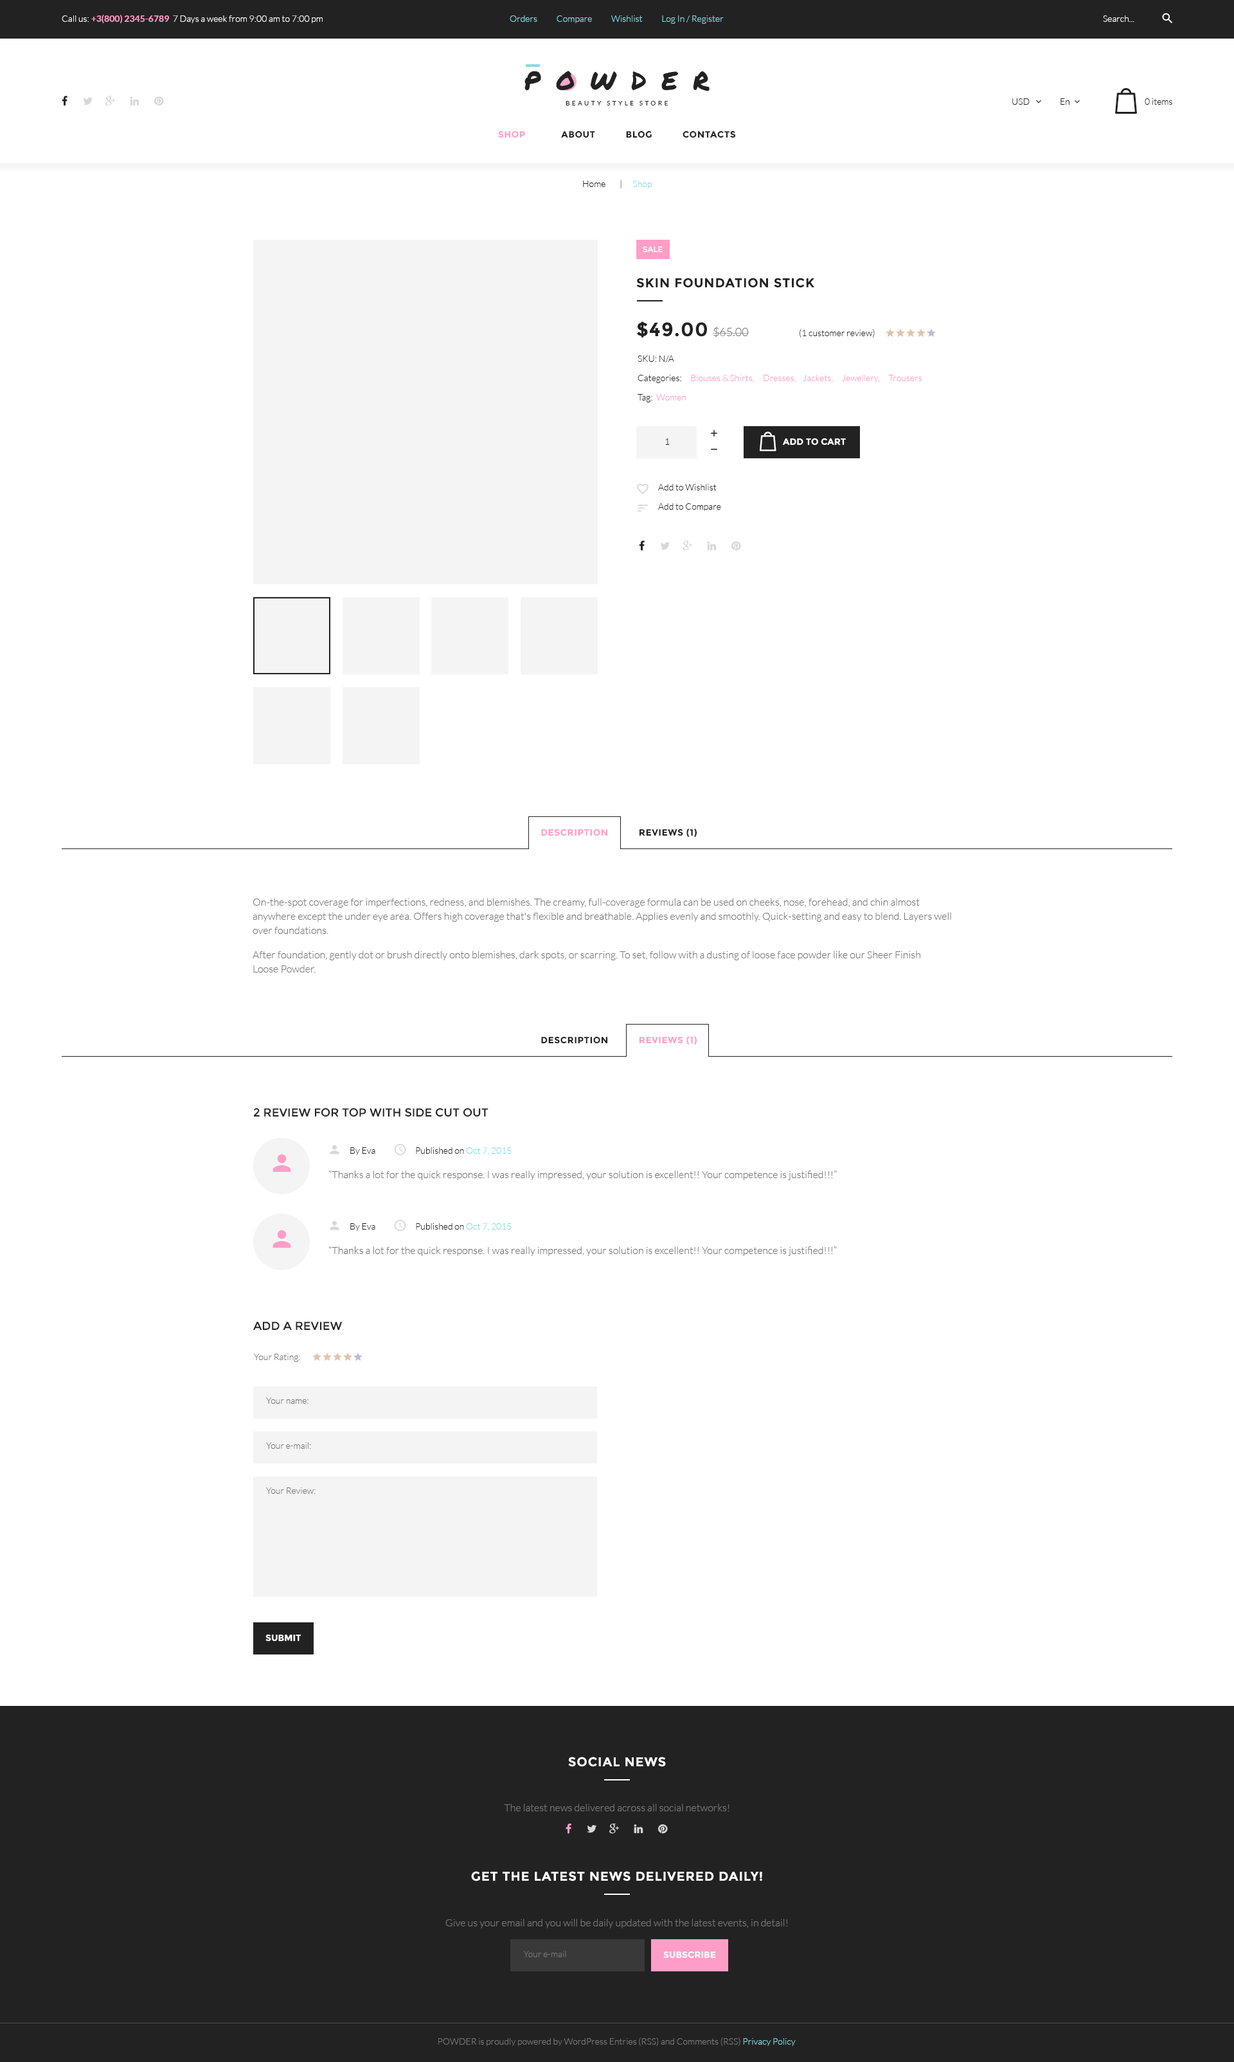
<style>
.page{position:relative;width:1234px;height:2062px;background:#ffffff}
.page>*{position:absolute;margin:0}
.t1{font:9px "Lato-Light";color:#ffffff}
.t2{font:9px "Lato-Bold";color:#fe9ec7}
.t3{font:9px "Lato-Light";color:#81dcdd}
.t4{font:25.7px "PermanentMarker";letter-spacing:0.6em;color:#232222;text-transform:uppercase}
.t5{font:6.4px "Lato-Regular";letter-spacing:0.34em;color:#232222;text-transform:uppercase}
.t6{font:9px "Lato-Light";color:#232222}
.t7{font:9px "Montserrat-Bold";letter-spacing:0.04em;color:#232222;text-transform:uppercase}
.t8{font:9px "Montserrat-Bold";letter-spacing:0.04em;color:#fe9ec7;text-transform:uppercase}
.t9{font:7.7px "Montserrat-Regular";color:#ffffff;text-transform:uppercase}
.t10{font:12.9px "Montserrat-Bold";letter-spacing:0.04em;color:#232222;text-transform:uppercase}
.t11{font:19.3px "Montserrat-Bold";letter-spacing:0.04em;color:#232222;text-transform:uppercase}
.t12{font:11.6px "Lato-Light";color:#777777}
.t13{font:9px/19.3px "Lato-Light";color:#fe9ec7}
.t14{font:9px/19.3px "Lato-Light";color:#232222}
.t15{font:9px "Montserrat-Bold";color:#ffffff;text-transform:uppercase}
.t16{font:10.3px/14.1px "Lato-Light";color:#777777}
.t17{font:11.6px "Montserrat-Regular";color:#232222;text-transform:uppercase}
.t18{font:10.3px "Lato-Light";color:#777777}
.t19{font:9px "Lato-Light";color:#777777}
.t20{font:12.9px "Montserrat-Bold";letter-spacing:0.04em;color:#ffffff;text-transform:uppercase}
.t21{font:9px "Lato-Light";color:#777777;text-transform:uppercase}
</style>
<div class="page">
<p class="t1" style="left:62px;top:15px;width:261px;height:9px">Call us: <span class="t2">+3(800) 2345-6789 </span> 7 Days a week from 9:00 am to 7:00 pm</p>
<p class="t3" style="left:510px;top:15px;width:214px;height:9px">Orders           Compare           Wishlist           Log In / Register</p>
<p class="t1" style="left:1103px;top:15px;width:32px;height:7px">Search...</p>
<p class="t4" style="left:525px;top:71px;width:185px;height:20px">powder</p>
<p class="t5" style="left:566px;top:101px;width:102px;height:4px">Beauty Style Store</p>
<p class="t6" style="left:1013px;top:98px;width:17px;height:7px">USD</p>
<p class="t6" style="left:1061px;top:98px;width:9px;height:7px">En</p>
<p class="t6" style="left:1145px;top:98px;width:28px;height:7px">0 items</p>
<p class="t7" style="left:498px;top:130px;width:238px;height:8px"><span class="t8">Shop      </span>       About           Blog           Contacts</p>
<p class="t6" style="left:583px;top:180px;width:69px;height:8px">Home        |      <span class="t3">Shop</span></p>
<p class="t9" style="left:643px;top:246px;width:20px;height:7px">Sale</p>
<p class="t10" style="left:636px;top:278px;width:179px;height:10px">SKIN FOUNDATION STICK</p>
<p class="t11" style="left:637px;top:321px;width:112px;height:17px">$49.00 <span class="t12">$65.00</span></p>
<p class="t6" style="left:800px;top:329px;width:75px;height:9px">(1 customer review)</p>
<p class="t13" style="left:638px;top:356px;width:285px;height:46px"><span class="t14">SKU: N/A<br>Categories:     </span>Blouses &amp; Shirts,     Dresses,    Jackets,     Jewellery,     Trousers<br><span class="t14">Tag:  </span>Women</p>
<p class="t15" style="left:783px;top:438px;width:63px;height:8px">Add to cart</p>
<p class="t6" style="left:665px;top:438px;width:5px;height:7px">1</p>
<p class="t14" style="left:658px;top:484px;width:63px;height:27px">Add to Wishlist<br>Add to Compare</p>
<p class="t8" style="left:541px;top:829px;width:157px;height:8px">Description      <span class="t7">     Reviews (1)</span></p>
<p class="t16" style="left:253px;top:898px;width:698px;height:36px">On-the-spot coverage for imperfections, redness, and blemishes. The creamy, full-coverage formula can be used on cheeks, nose, forehead, and chin almost anywhere except the under eye area. Offers high coverage that's flexible and breathable. Applies evenly and smoothly. Quick-setting and easy to blend. Layers well over foundations.</p>
<p class="t16" style="left:253px;top:951px;width:668px;height:22px">After foundation, gently dot or brush directly onto blemishes, dark spots, or scarring. To set, follow with a dusting of loose face powder like our Sheer Finish Loose Powder.</p>
<p class="t7" style="left:541px;top:1036px;width:157px;height:9px">Description           <span class="t8">Reviews (1)</span></p>
<p class="t17" style="left:253px;top:1108px;width:236px;height:9px">2 review for Top with side cut out</p>
<p class="t6" style="left:350px;top:1148px;width:25px;height:7px">By Eva</p>
<p class="t6" style="left:416px;top:1148px;width:96px;height:7px">Published on <span class="t3">Oct 7, 2015</span></p>
<p class="t18" style="left:328px;top:1171px;width:509px;height:9px">“Thanks a lot for the quick response. I was really impressed, your solution is excellent!! Your competence is justified!!!”</p>
<p class="t6" style="left:350px;top:1223px;width:25px;height:8px">By Eva</p>
<p class="t6" style="left:416px;top:1223px;width:96px;height:8px">Published on <span class="t3">Oct 7, 2015</span></p>
<p class="t18" style="left:328px;top:1246px;width:509px;height:10px">“Thanks a lot for the quick response. I was really impressed, your solution is excellent!! Your competence is justified!!!”</p>
<p class="t17" style="left:253px;top:1322px;width:90px;height:9px">Add a Review</p>
<p class="t19" style="left:254px;top:1354px;width:46px;height:8px">Your Rating:</p>
<p class="t19" style="left:266px;top:1398px;width:43px;height:6px">Your name:</p>
<p class="t19" style="left:266px;top:1443px;width:45px;height:6px">Your e-mail:</p>
<p class="t19" style="left:266px;top:1488px;width:50px;height:6px">Your Review:</p>
<p class="t15" style="left:266px;top:1634px;width:36px;height:8px">Submit</p>
<p class="t20" style="left:568px;top:1757px;width:98px;height:10px">Social news</p>
<p class="t18" style="left:504px;top:1804px;width:226px;height:8px">The latest news delivered across all social networks!</p>
<p class="t20" style="left:471px;top:1871px;width:291px;height:11px">Get the latest news delivered daily!</p>
<p class="t18" style="left:446px;top:1919px;width:342px;height:10px">Give us your email and you will be daily updated with the latest events, in detail!</p>
<p class="t19" style="left:523px;top:1951px;width:43px;height:7px">Your e-mail</p>
<p class="t15" style="left:663px;top:1951px;width:53px;height:8px">Subscribe</p>
<p class="t19" style="left:438px;top:2038px;width:358px;height:8px"><span class="t21">powder</span> is proudly powered by WordPress Entries (RSS) and Comments (RSS) <span class="t3">Privacy Policy</span></p>
</div>
